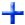
<style>
.page{position:relative;width:25px;height:25px;background:#ffffff}
.page>*{position:absolute;margin:0}
.t1{font:43px "LatinWide"}
</style>
<div class="page">
<p class="t1" style="left:1px;top:2px;width:23px;height:22px">+</p>
</div>
